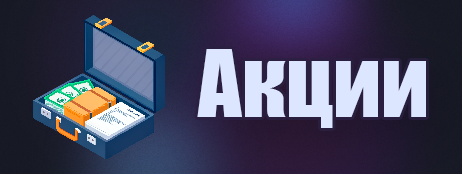
<style>
.page{position:relative;width:462px;height:174px}
.page>*{position:absolute;margin:0}
.t1{font:85.8px "Impact";color:#dde6ff}
</style>
<div class="page">
<p class="t1" style="left:197px;top:49px;width:229px;height:79px">Акции</p>
</div>
